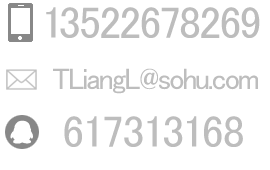
<style>
.page{position:relative;width:270px;height:170px;background:#ffffff}
.page>*{position:absolute;margin:0}
.t1{font:44.9px "MS-PGothic";color:#bcbcbc}
.t2{font:30px "MS-PGothic";color:#bdbdbd}
.t3{font:44.9px "MS-PGothic";color:#bdbdbd}
</style>
<div class="page">
<p class="t1" style="left:46px;top:7px;width:214px;height:31px">13522678269</p>
<p class="t2" style="left:53px;top:68px;width:205px;height:26px">TLiangL@sohu.com</p>
<p class="t3" style="left:64px;top:116px;width:179px;height:31px">617313168</p>
</div>
